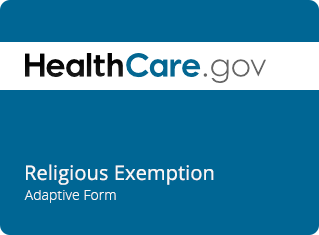
<style>
.page{position:relative;width:319px;height:235px;background:#006694}
.page>*{position:absolute;margin:0}
.t1{font:20px "OpenSans";letter-spacing:0.005em;color:#f7f7f7}
.t2{font:14px "OpenSans-Light";letter-spacing:0.005em;color:#f7f7f7}
</style>
<div class="page">
<p class="t1" style="left:26px;top:164px;width:188px;height:21px">Religious Exemption</p>
<p class="t2" style="left:24px;top:190px;width:92px;height:13px">Adaptive Form</p>
</div>
